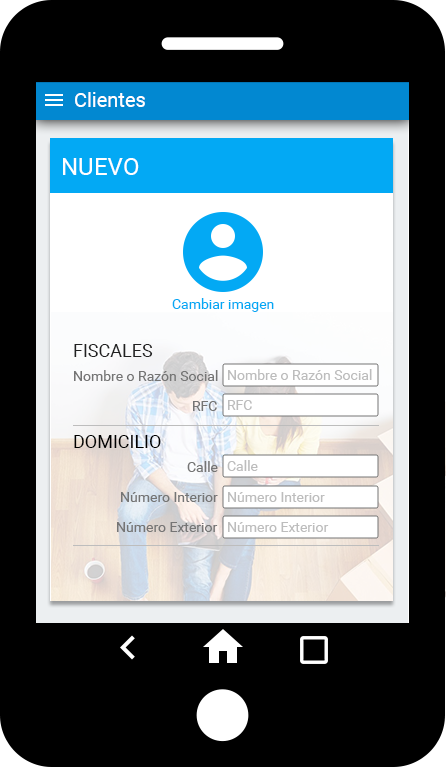
<style>
.page{position:relative;width:446px;height:768px;background:#000000}
.page>*{position:absolute;margin:0}
.t1{font:20px "Roboto-Regular";color:#ffffff}
.t2{font:24px "Roboto-Regular";color:#ffffff}
.t3{font:14px "Roboto-Regular";color:#03a9f4}
.t4{font:18px "Roboto-Regular";color:#212121}
.t5{font:14px "Roboto-Regular";color:#757575}
.t6{font:14px "Roboto-Regular";color:#bdbdbd}
.t7{font:18px "Roboto-Regular";color:#000000}
</style>
<div class="page">
<p class="t1" style="left:75px;top:92px;width:70px;height:15px">Clientes</p>
<p class="t2" style="left:63px;top:158px;width:76px;height:17px">NUEVO</p>
<p class="t3" style="left:172px;top:298px;width:102px;height:14px">Cambiar imagen</p>
<p class="t4" style="left:74px;top:344px;width:79px;height:13px">FISCALES</p>
<p class="t5" style="left:74px;top:370px;width:144px;height:11px">Nombre o Razón Social</p>
<p class="t6" style="left:228px;top:369px;width:144px;height:11px">Nombre o Razón Social</p>
<p class="t5" style="left:193px;top:401px;width:24px;height:10px">RFC</p>
<p class="t6" style="left:228px;top:400px;width:24px;height:10px">RFC</p>
<p class="t7" style="left:74px;top:435px;width:87px;height:13px">DOMICILIO</p>
<p class="t5" style="left:187px;top:461px;width:31px;height:11px">Calle</p>
<p class="t6" style="left:227px;top:460px;width:31px;height:11px">Calle</p>
<p class="t5" style="left:121px;top:492px;width:97px;height:10px">Número Interior</p>
<p class="t6" style="left:228px;top:492px;width:97px;height:10px">Número Interior</p>
<p class="t5" style="left:117px;top:522px;width:101px;height:10px">Número Exterior</p>
<p class="t6" style="left:228px;top:522px;width:101px;height:10px">Número Exterior</p>
</div>
